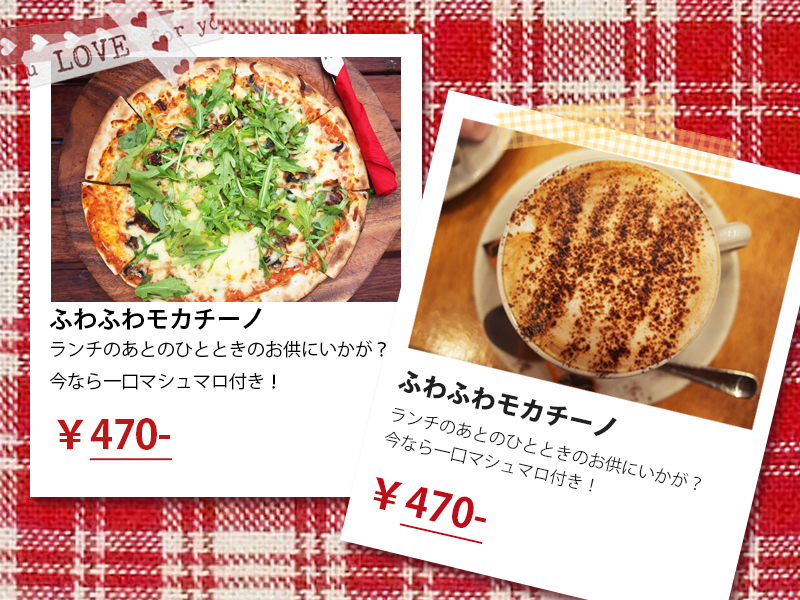
<style>
.page{position:relative;width:800px;height:600px;background:#ffffff}
.page>*{position:absolute;margin:0}
.t1{font:24px "KozGoPr6N-Bold";color:#000000}
.t2{font:18px "KozGoPr6N-Regular";color:#000000}
.t3{font:40px "KozGoPr6N-Bold";color:#be1616;text-decoration:underline}
.t4{font:40px "KozGoPr6N-Bold";color:#be1616}
</style>
<div class="page">
<p class="t1" style="left:49px;top:308px;width:213px;height:22px">ふわふわモカチーノ</p>
<p class="t2" style="left:49px;top:340px;width:337px;height:50px">ランチのあとのひとときのお供にいかが？<br>今なら一口マシュマロ付き！</p>
<p class="t3" style="left:57px;top:418px;width:116px;height:43px"><span class="t4">￥</span>470-</p>
</div>
